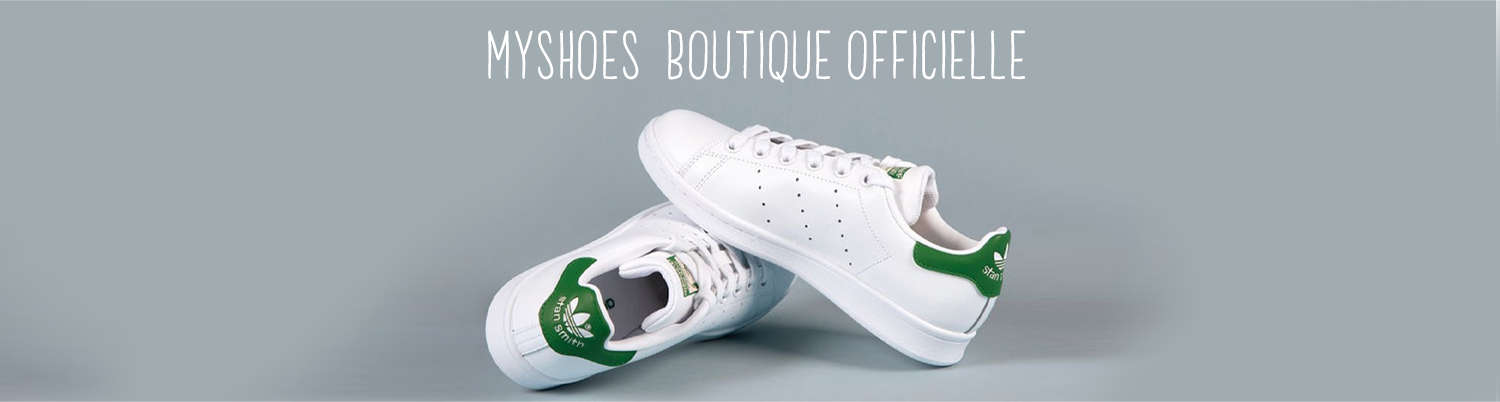
<style>
.page{position:relative;width:1500px;height:402px;background:#a1acb0}
.page>*{position:absolute;margin:0}
.t1{font:69.5px "BrookDemo";letter-spacing:0.025em;color:#ffffff}
</style>
<div class="page">
<p class="t1" style="left:488px;top:30px;width:538px;height:53px">MyShoes  Boutique officielle</p>
</div>
